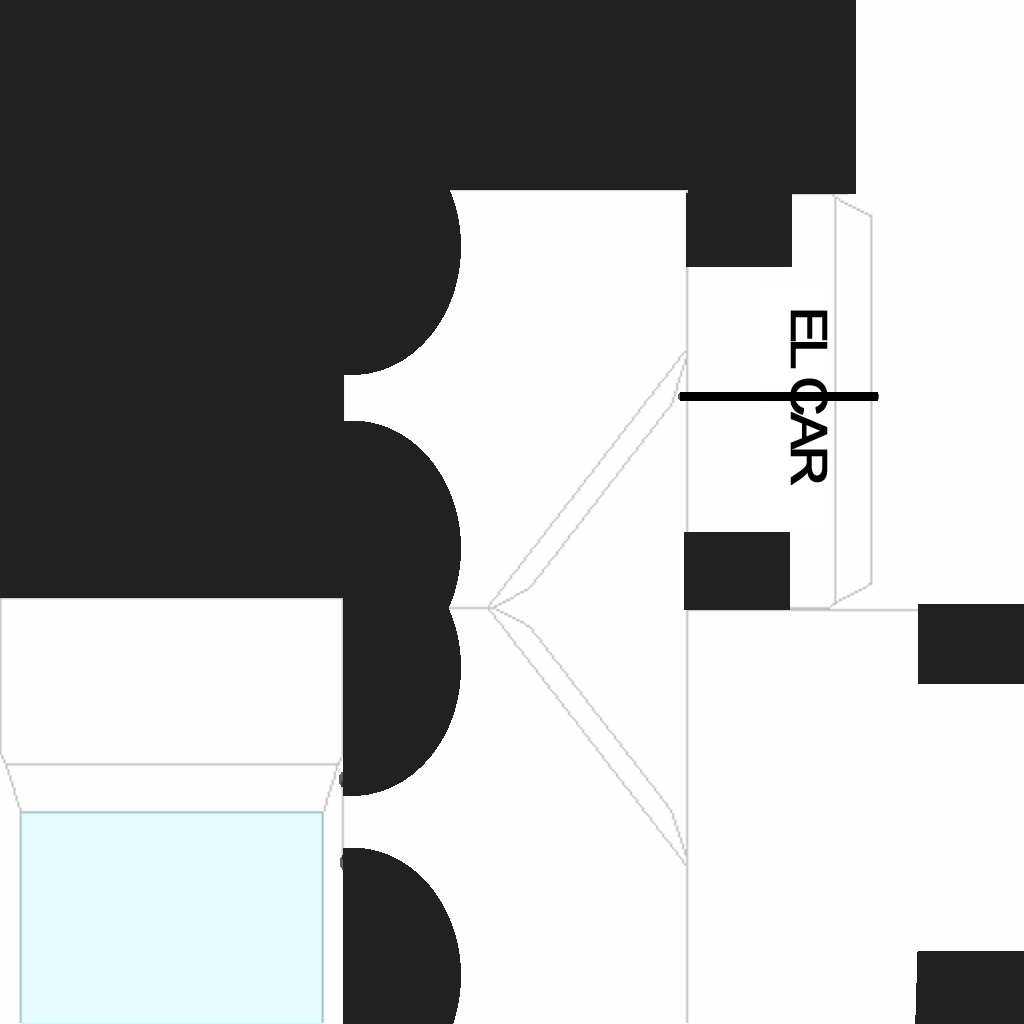
<style>
.page{position:relative;width:1024px;height:1024px;background:#fefefe}
.page>*{position:absolute;margin:0}
.t1{font:50px "ArialMT";letter-spacing:-0.1em;color:#000000;font-variant:small-caps;font-weight:bold;scale:1.1 1}
</style>
<div class="page">
<p class="t1" style="left:790px;top:310px;width:38px;height:175px;rotate:90deg">EL CAR</p>
</div>
